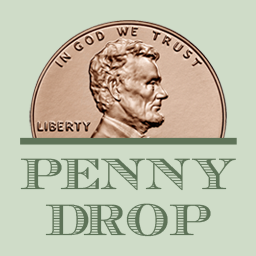
<style>
.page{position:relative;width:256px;height:256px;background:#cfdcc8}
.page>*{position:absolute;margin:0}
.t1{font:45px "EcuyerDAX";color:#5e7358}
</style>
<div class="page">
<p class="t1" style="left:20px;top:158px;width:216px;height:33px">PENNY</p>
<p class="t1" style="left:45px;top:203px;width:166px;height:34px">DROP</p>
</div>
